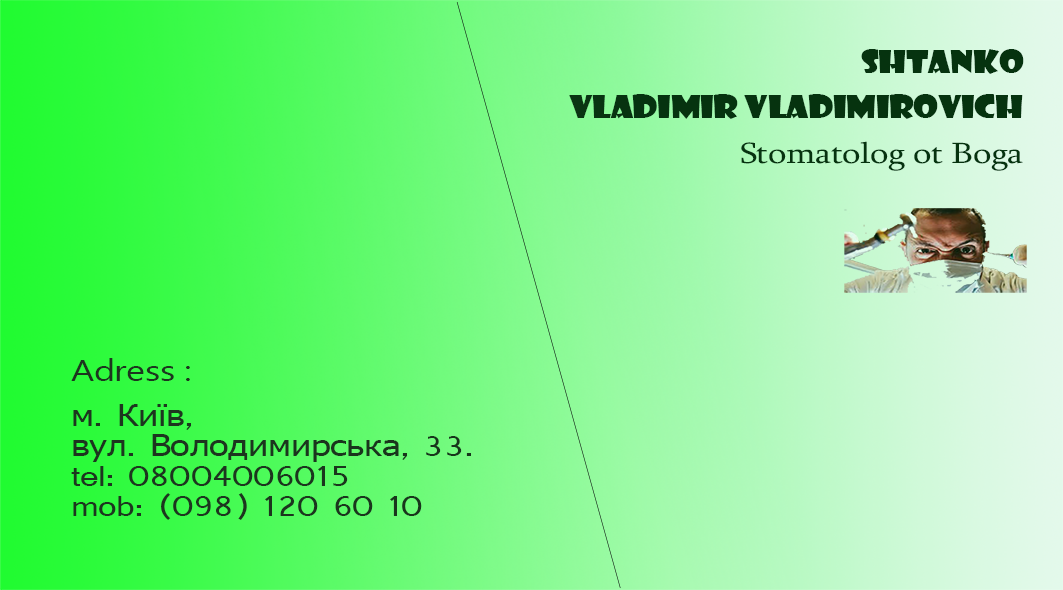
<style>
.page{position:relative;width:1063px;height:590px}
.page>*{position:absolute;margin:0}
.t1{font:30px/15px "ShowcardGothic-Reg";letter-spacing:-0.01em;color:#061e07;scale:1.2 1}
.t2{font:30px/15px "Sylfaen";letter-spacing:-0.01em;color:#061e07;scale:1.2 1}
.t3{font:30px/15px "Shruti";letter-spacing:-0.01em;color:#061e07;scale:1.2 1}
.t4{font:30px/15px "SegoeUISymbol";letter-spacing:-0.01em;color:#061e07;scale:1.2 1}
.t5{font:30px/15px "Tahoma";letter-spacing:-0.01em;color:#061e07;scale:1.2 1}
</style>
<div class="page">
<p class="t1" style="left:569px;top:49px;width:455px;height:122px;text-align:right">Shtanko<br><br><br> Vladimir Vladimirovich<br><br><br>   <span class="t2">Stomatolog ot Boga</span></p>
<p class="t3" style="left:71px;top:358px;width:400px;height:162px"><span class="t4">Adress :<br><br><br></span><span class="t5">м</span>. <span class="t5">Київ</span>, <br><span class="t5"><br>вул</span>. <span class="t5">Володимирська</span>, 33.<br><br>tel: 08004006015<br><br>mob: (098) 120 60 10</p>
</div>
